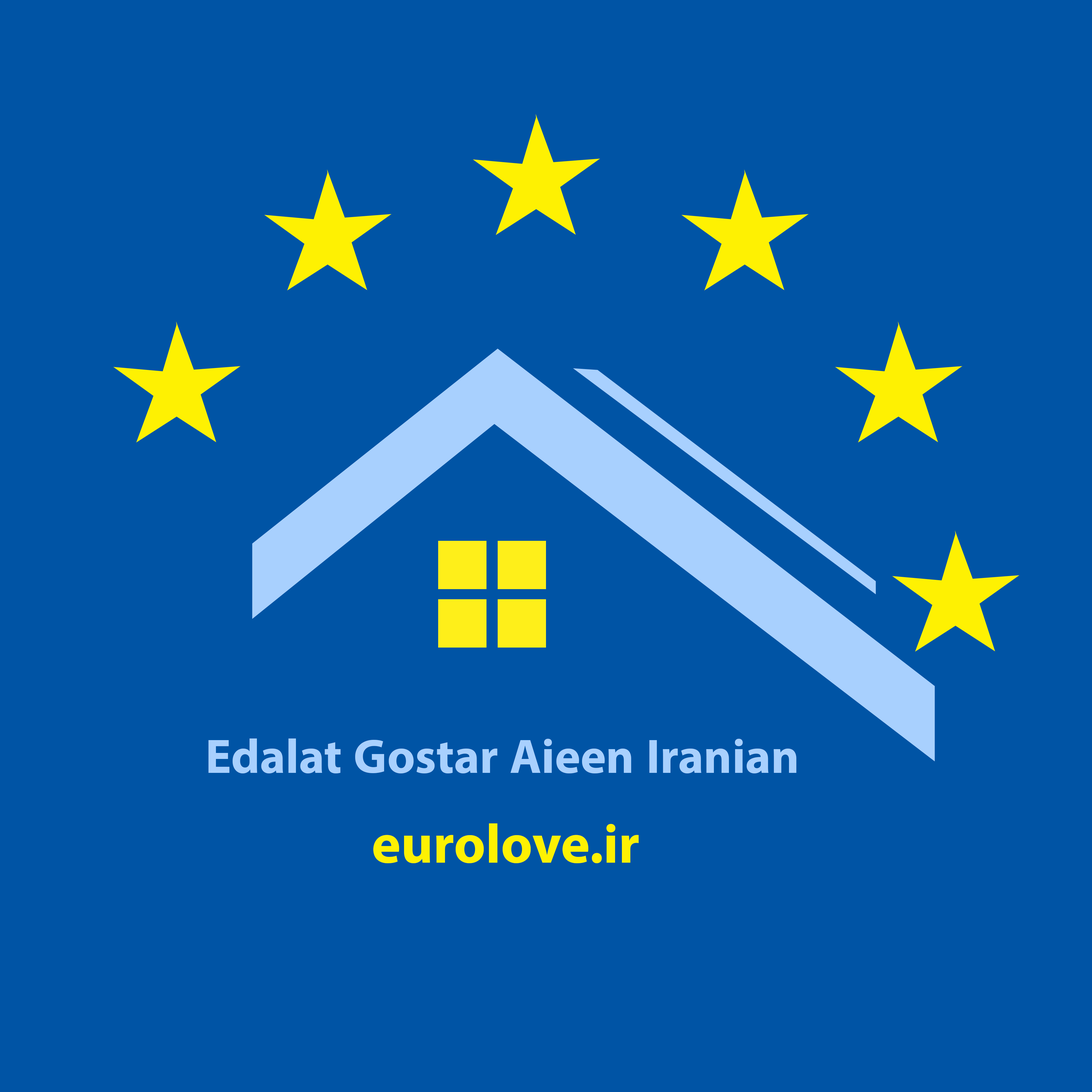
<style>
.page{position:relative;width:1092px;height:1092px;background:#0054a5}
.page>*{position:absolute;margin:0}
.t1{font:68px "MyriadArabic-Bold";color:#a8d0fe}
.t2{font:77.5px "MyriadArabic-Bold";color:#fef102}
</style>
<div class="page">
<p class="t1" style="left:208px;top:738px;width:588px;height:36px">Edalat Gostar Aieen Iranian</p>
<p class="t2" style="left:373px;top:823px;width:266px;height:40px">eurolove.ir</p>
</div>
